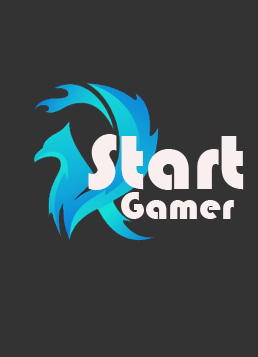
<style>
.page{position:relative;width:258px;height:357px;background:#333333}
.page>*{position:absolute;margin:0}
.t1{font:80px "Bauhaus93";color:#f9efef}
.t2{font:40px "Bauhaus93";color:#f9efef}
</style>
<div class="page">
<p class="t1" style="left:88px;top:134px;width:156px;height:56px">Start</p>
<p class="t2" style="left:121px;top:192px;width:113px;height:27px">Gamer</p>
</div>
